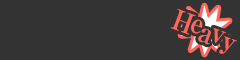
<style>
.page{position:relative;width:240px;height:60px;background:#333333}
.page>*{position:absolute;margin:0}
.t1{font:28px "RyuminPro-ExBold";letter-spacing:-0.08em;color:#ff655d;scale:0.9 1}
</style>
<div class="page">
<p class="t1" style="left:170px;top:8px;width:67px;height:46px;rotate:20deg">Heavy</p>
</div>
